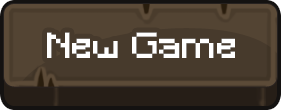
<style>
.page{position:relative;width:281px;height:110px;background:#473a2c}
.page>*{position:absolute;margin:0}
.t1{font:33.9px "Minecraft";letter-spacing:0.01em;color:#ffffff;scale:1.07 1}
</style>
<div class="page">
<p class="t1" style="left:47px;top:32px;width:188px;height:26px">New Game</p>
</div>
